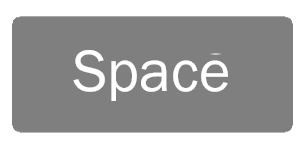
<style>
.page{position:relative;width:304px;height:152px;background:#7f7f7f}
.page>*{position:absolute;margin:0}
.t1{font:60.1px "FranklinGothic-Book";color:#ffffff}
</style>
<div class="page">
<p class="t1" style="left:73px;top:50px;width:155px;height:51px">Space</p>
</div>
